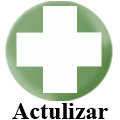
<style>
.page{position:relative;width:120px;height:120px;background:#ffffff}
.page>*{position:absolute;margin:0}
.t1{font:24px "TimesNewRomanPS-BoldMT";color:#000000}
</style>
<div class="page">
<p class="t1" style="left:12px;top:103px;width:96px;height:16px">Actulizar</p>
</div>
